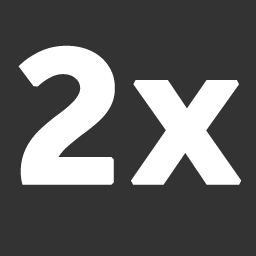
<style>
.page{position:relative;width:256px;height:256px;background:#333333}
.page>*{position:absolute;margin:0}
.t1{font:190px "BreezeSans-Bold";color:#ffffff;font-weight:bold;scale:1.05 1}
</style>
<div class="page">
<p class="t1" style="left:18px;top:45px;width:224px;height:140px">2x</p>
</div>
